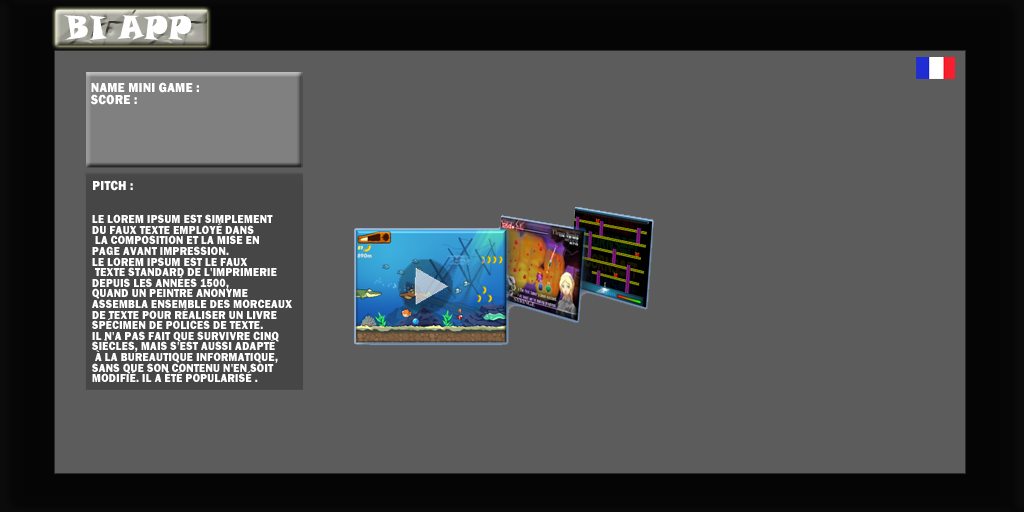
<style>
.page{position:relative;width:1024px;height:512px;background:#5c5c5c}
.page>*{position:absolute;margin:0}
.t1{font:32.6px "SnapITC-Regular";letter-spacing:0.02em;color:#ffffff;text-transform:uppercase;scale:0.89 1}
.t2{font:13.6px "FranklinGothic-Heavy";letter-spacing:0.02em;color:#ffffff;text-transform:uppercase;scale:0.89 1}
.t3{font:12px "FranklinGothic-Heavy";letter-spacing:0.02em;color:#ffffff;text-transform:uppercase;scale:0.89 1}
</style>
<div class="page">
<p class="t1" style="left:64px;top:15px;width:128px;height:25px">Bi APP</p>
<p class="t2" style="left:90px;top:82px;width:109px;height:23px">Name MIni Game :<br>Score :</p>
<p class="t2" style="left:93px;top:180px;width:40px;height:11px">PITCH :</p>
<p class="t3" style="left:92px;top:214px;width:200px;height:168px">Le Lorem Ipsum est simplement<br>du faux texte employé dans<br> la composition et la mise en <br>page avant impression. <br>Le Lorem Ipsum est le faux<br> texte standard de l'imprimerie <br>depuis les années 1500, <br>quand un peintre anonyme <br>assembla ensemble des morceaux <br>de texte pour réaliser un livre <br>spécimen de polices de texte. <br>Il n'a pas fait que survivre cinq <br>siècles, mais s'est aussi adapté<br> à la bureautique informatique, <br>sans que son contenu n'en soit <br>modifié. Il a été popularisé .</p>
</div>
